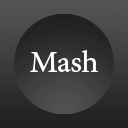
<style>
.page{position:relative;width:128px;height:128px}
.page>*{position:absolute;margin:0}
.t1{font:30px "AdobeHebrew-Regular";color:#ffffff}
</style>
<div class="page">
<p class="t1" style="left:30px;top:50px;width:68px;height:22px">Mash</p>
</div>
